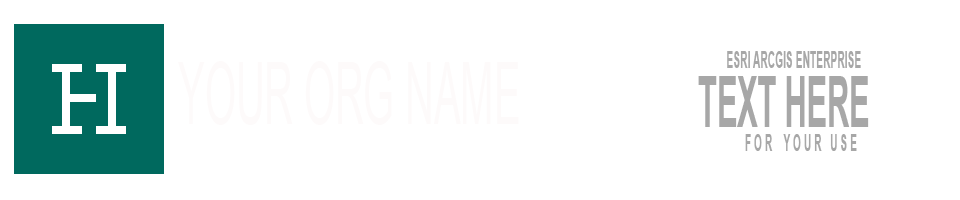
<style>
.page{position:relative;width:960px;height:200px;background:#ffffff}
.page>*{position:absolute;margin:0}
.t1{font:22.7px "Arial-BoldMT";color:#a7a7a7;text-transform:uppercase;scale:0.45 1}
.t2{font:86.3px "ArialMT";color:#fdfafa;text-transform:uppercase;scale:0.46 1}
.t3{font:71.1px "Arial-BoldMT";color:#a7a7a7;text-transform:uppercase;scale:0.43 1}
</style>
<div class="page">
<p class="t1" style="left:727px;top:51px;width:134px;height:17px">Esri ArcGIS Enterprise</p>
<p class="t2" style="left:178px;top:61px;width:341px;height:64px">Your Org name</p>
<p class="t3" style="left:698px;top:76px;width:171px;height:51px">Text Here</p>
<p class="t1" style="left:745px;top:134px;width:112px;height:17px">F o r    y o u r   U s e</p>
</div>
